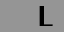
<style>
.page{position:relative;width:64px;height:32px;background:#959595}
.page>*{position:absolute;margin:0}
.t1{font:24px "FolkPro-Heavy";color:#000000}
</style>
<div class="page">
<p class="t1" style="left:39px;top:6px;width:14px;height:20px">L</p>
</div>
